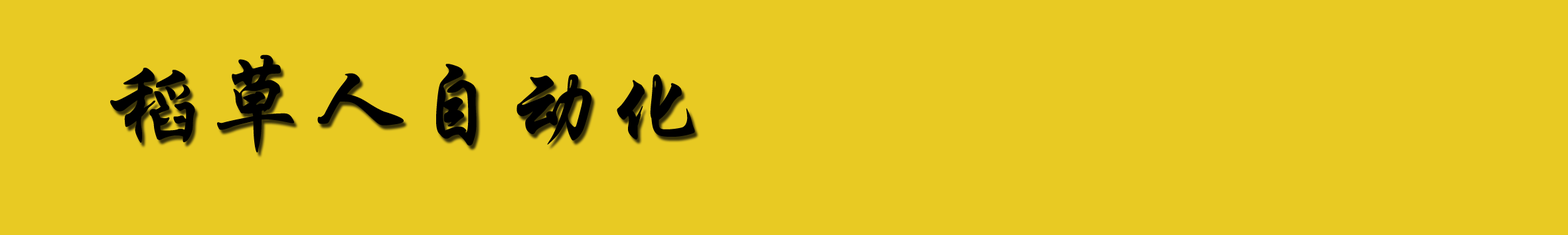
<style>
.page{position:relative;width:1568px;height:235px;background:#e8ca23}
.page>*{position:absolute;margin:0}
.t1{font:99.6px "STXingkai";color:#000000}
</style>
<div class="page">
<p class="t1" style="left:110px;top:54px;width:585px;height:99px">稻草人自动化</p>
</div>
